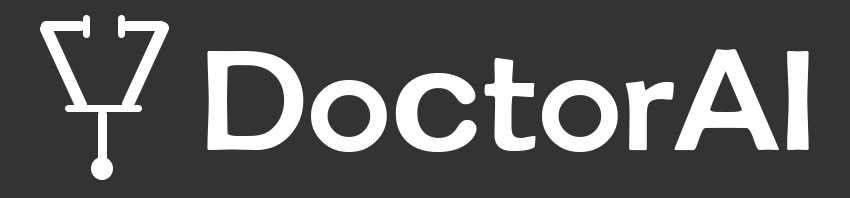
<style>
.page{position:relative;width:850px;height:198px;background:#333333}
.page>*{position:absolute;margin:0}
.t1{font:144.5px "BerlinSansFB-Reg";color:#ffffff;scale:1.11 1}
.t2{font:144.5px "ArialRoundedMTBold";color:#ffffff;scale:1.11 1}
</style>
<div class="page">
<p class="t1" style="left:207px;top:49px;width:602px;height:103px">Do<span class="t2">c</span>torAI</p>
</div>
